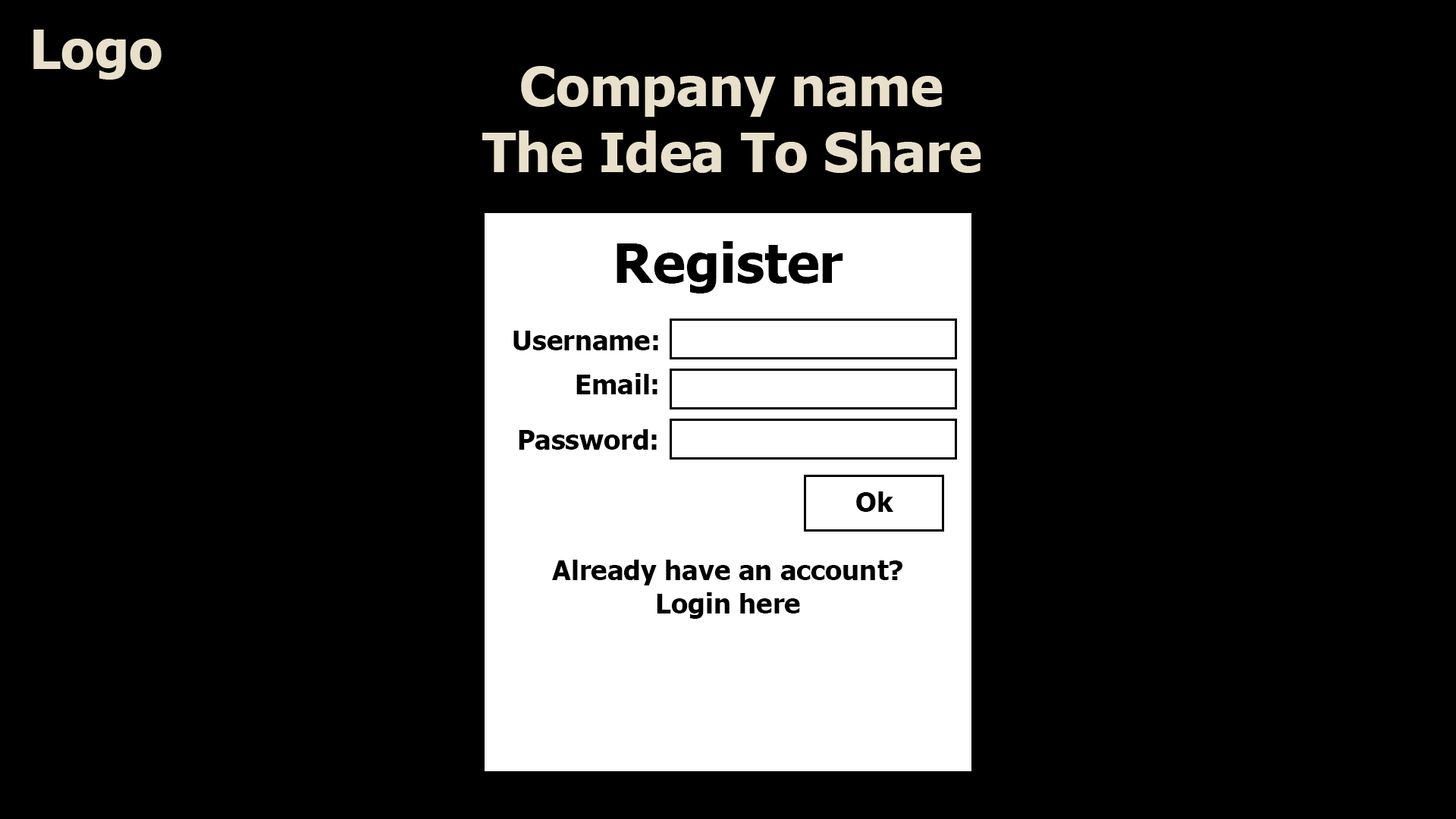
<style>
.page{position:relative;width:1456px;height:819px;background:#000000}
.page>*{position:absolute;margin:0}
.t1{font:54.6px "Tahoma-Bold";color:#e8e0cb}
.t2{font:54.6px "Tahoma-Bold";color:#000000}
.t3{font:27.3px "Tahoma-Bold";color:#000000}
</style>
<div class="page">
<p class="t1" style="left:33px;top:30px;width:129px;height:50px">Logo</p>
<p class="t1" style="left:521px;top:66px;width:422px;height:51px">Company name</p>
<p class="t1" style="left:482px;top:130px;width:499px;height:43px">The Idea To Share</p>
<p class="t2" style="left:617px;top:241px;width:226px;height:52px">Register</p>
<p class="t3" style="left:513px;top:331px;width:145px;height:19px">Username:</p>
<p class="t3" style="left:576px;top:373px;width:81px;height:21px">Email:</p>
<p class="t3" style="left:519px;top:429px;width:138px;height:21px">Password:</p>
<p class="t3" style="left:856px;top:491px;width:37px;height:21px">Ok</p>
<p class="t3" style="left:552px;top:560px;width:350px;height:59px;text-align:center">Already have an account?<br>Login here</p>
</div>
